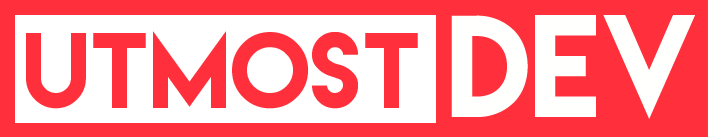
<style>
.page{position:relative;width:708px;height:137px;background:#ff303b}
.page>*{position:absolute;margin:0}
.t1{font:129.2px "LemonMilk";color:#fffffe}
.t2{font:95.8px "LemonMilk";color:#ff303b}
</style>
<div class="page">
<p class="t1" style="left:451px;top:15px;width:244px;height:104px">DEV</p>
<p class="t2" style="left:26px;top:31px;width:392px;height:78px">UTmost</p>
</div>
